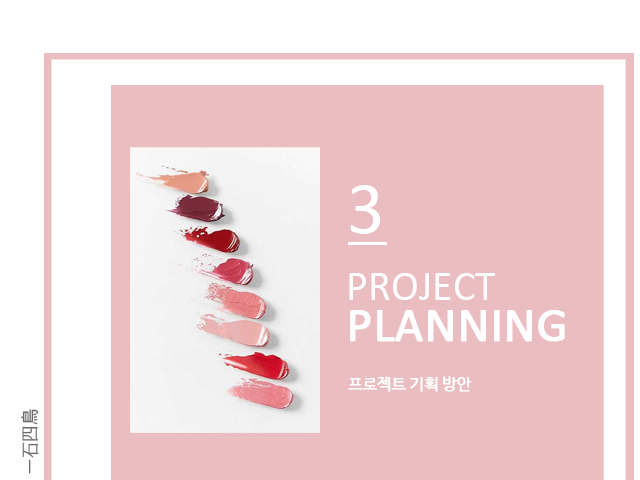
<style>
.page{position:relative;width:640px;height:480px;background:#eabec1}
.page>*{position:absolute;margin:0}
.t1{font:74.2px "Calibri";color:#ffffff}
.t2{font:42.2px "Calibri";color:#ffffff}
.t3{font:48.8px "Calibri";color:#ffffff;font-weight:bold}
.t4{font:15.7px "NanumBarunGothic";color:#fefefe;font-weight:bold}
.t5{font:18.5px "NanumBarunGothic";color:#6f6c6c}
</style>
<div class="page">
<p class="t1" style="left:350px;top:185px;width:30px;height:49px">3</p>
<p class="t2" style="left:349px;top:273px;width:147px;height:27px">PROJECT</p>
<p class="t3" style="left:350px;top:310px;width:215px;height:32px">PLANNING</p>
<p class="t4" style="left:348px;top:376px;width:124px;height:16px">프로젝트 기획 방안</p>
<p class="t5" style="left:21px;top:409px;width:18px;height:65px;rotate:-90deg">一石四鳥</p>
</div>
